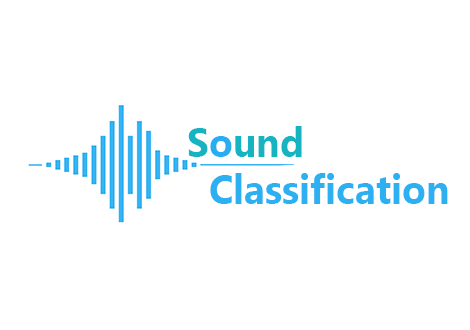
<style>
.page{position:relative;width:470px;height:330px;background:#ffffff}
.page>*{position:absolute;margin:0}
.t1{font:40.6px "MicrosoftNewTaiLue-Bold";color:#2cb0f1;scale:0.96 1}
.t2{font:40.6px "MicrosoftNewTaiLue-Bold";color:#16b4c1;scale:0.96 1}
.t3{font:40.6px "MicrosoftNewTaiLue-Bold";color:#27aef1;scale:0.96 1}
</style>
<div class="page">
<p class="t1" style="left:188px;top:126px;width:260px;height:78px"><span class="t2">S</span><span class="t3">o</span><span class="t2">und<br>  </span>Classification</p>
</div>
